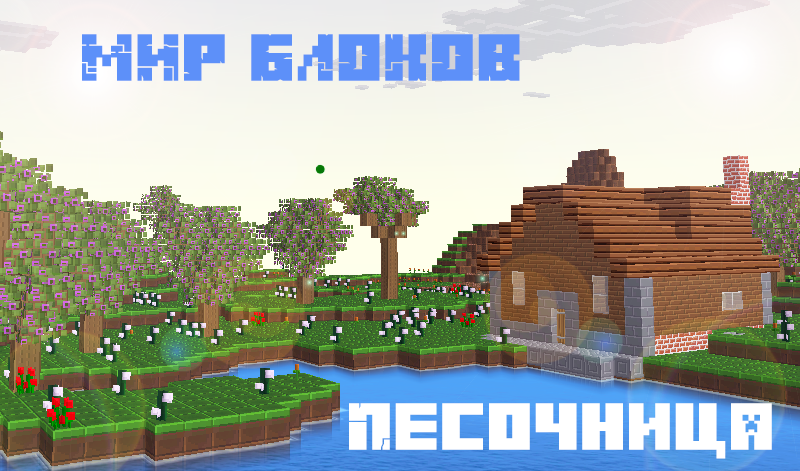
<style>
.page{position:relative;width:800px;height:471px}
.page>*{position:absolute;margin:0}
.t1{font:46.7px "Minecraft-Title-Cyrillic";color:#5d90f9}
.t2{font:46.7px "Minecraft-Title-Cyrillic";color:#ffffff}
</style>
<div class="page">
<p class="t1" style="left:82px;top:34px;width:438px;height:47px">МИР БЛОКОВ</p>
<p class="t2" style="left:349px;top:403px;width:423px;height:56px">Песочница</p>
</div>
